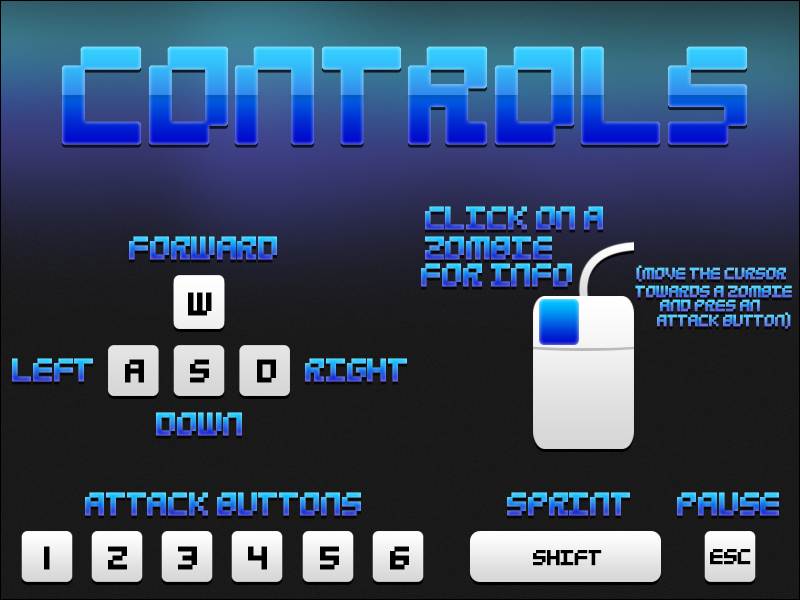
<style>
.page{position:relative;width:800px;height:600px}
.page>*{position:absolute;margin:0}
.t1{font:150px "5Mikropix";letter-spacing:-0.075em;font-weight:bold}
.t2{font:36px "5Mikropix";letter-spacing:-0.075em;font-weight:bold}
.t3{font:18px "5Mikropix";letter-spacing:-0.075em;font-weight:bold}
.t4{font:24px "5Mikropix";letter-spacing:-0.075em;color:#000000;font-weight:bold}
</style>
<div class="page">
<p class="t1" style="left:61px;top:46px;width:687px;height:99px">CONTROLS</p>
<p class="t2" style="left:425px;top:206px;width:178px;height:24px">CLICK ON A</p>
<p class="t2" style="left:129px;top:236px;width:148px;height:24px">FORWARD</p>
<p class="t2" style="left:425px;top:236px;width:127px;height:24px">ZOMBIE</p>
<p class="t2" style="left:421px;top:263px;width:151px;height:24px">FOR INFO</p>
<p class="t3" style="left:636px;top:265px;width:150px;height:17px">(MOVE THE CURSOR</p>
<p class="t3" style="left:635px;top:285px;width:157px;height:13px">TOWARDS A ZOMBIE</p>
<p class="t3" style="left:660px;top:299px;width:100px;height:13px">AND PRES AN</p>
<p class="t3" style="left:657px;top:312px;width:134px;height:17px">ATTACK BUTTON)</p>
<p class="t2" style="left:12px;top:358px;width:81px;height:24px">LEFT</p>
<p class="t2" style="left:305px;top:358px;width:102px;height:24px">RIGHT</p>
<p class="t2" style="left:156px;top:412px;width:86px;height:24px">DOWN</p>
<p class="t2" style="left:85px;top:492px;width:276px;height:24px">ATTACK BUTTONS</p>
<p class="t2" style="left:507px;top:492px;width:123px;height:24px">SPRINT</p>
<p class="t2" style="left:677px;top:492px;width:102px;height:24px">PAUSE</p>
<p class="t4" style="left:533px;top:550px;width:69px;height:16px">SHIFT</p>
<p class="t4" style="left:710px;top:549px;width:41px;height:16px">ESC</p>
</div>
